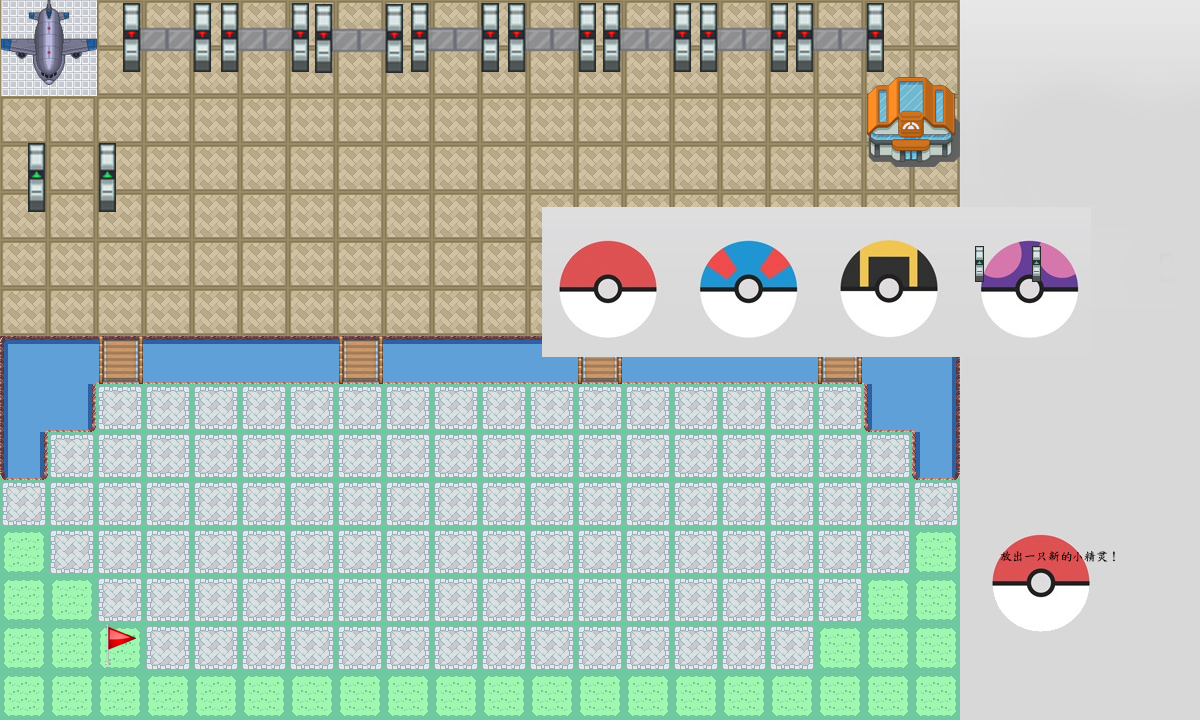
<style>
.page{position:relative;width:1200px;height:720px}
.page>*{position:absolute;margin:0}
.t1{font:12px "DFKaiShu-SB-Estd-BF";color:#000000}
</style>
<div class="page">
<p class="t1" style="left:1000px;top:551px;width:115px;height:11px">放出一只新的小精灵！</p>
</div>
